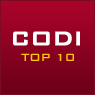
<style>
.page{position:relative;width:95px;height:95px}
.page>*{position:absolute;margin:0}
.t1{font:26px "BankGothicBT-Medium";letter-spacing:-0.025em;color:#ffffff;font-weight:bold;scale:0.96 1}
.t2{font:14px "BankGothicBT-Medium";letter-spacing:-0.025em;color:#ffc704;scale:0.96 1}
</style>
<div class="page">
<p class="t1" style="left:13px;top:31px;width:67px;height:15px">CODI</p>
<p class="t2" style="left:21px;top:53px;width:53px;height:8px">TOP 10</p>
</div>
